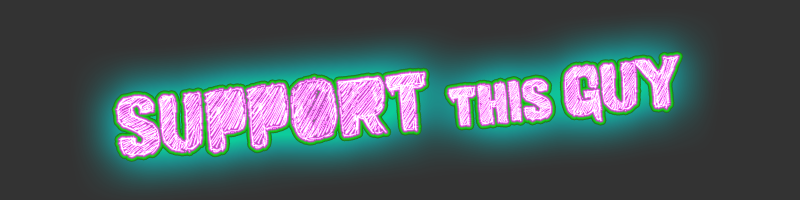
<style>
.page{position:relative;width:800px;height:200px;background:#333333}
.page>*{position:absolute;margin:0}
.t1{font:72px "vtksstudy";color:#ffffff}
.t2{font:48px "vtksstudy";color:#ffffff}
.t3{font:60px "vtksstudy";color:#ffffff}
</style>
<div class="page">
<p class="t1" style="left:116px;top:56px;width:563px;height:101px;rotate:-5deg">support <span class="t2">this </span><span class="t3">guy</span></p>
</div>
